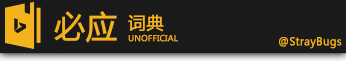
<style>
.page{position:relative;width:346px;height:61px;background:#1a1a1a}
.page>*{position:absolute;margin:0}
.t1{font:31.5px "MicrosoftYaHei";color:#f4b31c;font-weight:bold}
.t2{font:17.1px "MicrosoftYaHei";color:#f4b31c;font-weight:bold}
.t3{font:8.1px "MicrosoftYaHei";color:#f4b31c;font-weight:bold}
.t4{font:10.7px "MicrosoftYaHei";color:#f4b31c;font-weight:bold}
</style>
<div class="page">
<p class="t1" style="left:54px;top:11px;width:63px;height:32px">必应</p>
<p class="t2" style="left:128px;top:14px;width:36px;height:18px">词典</p>
<p class="t3" style="left:128px;top:34px;width:50px;height:8px">UNOFFICIAL</p>
<p class="t4" style="left:279px;top:37px;width:63px;height:12px">@StrayBugs</p>
</div>
